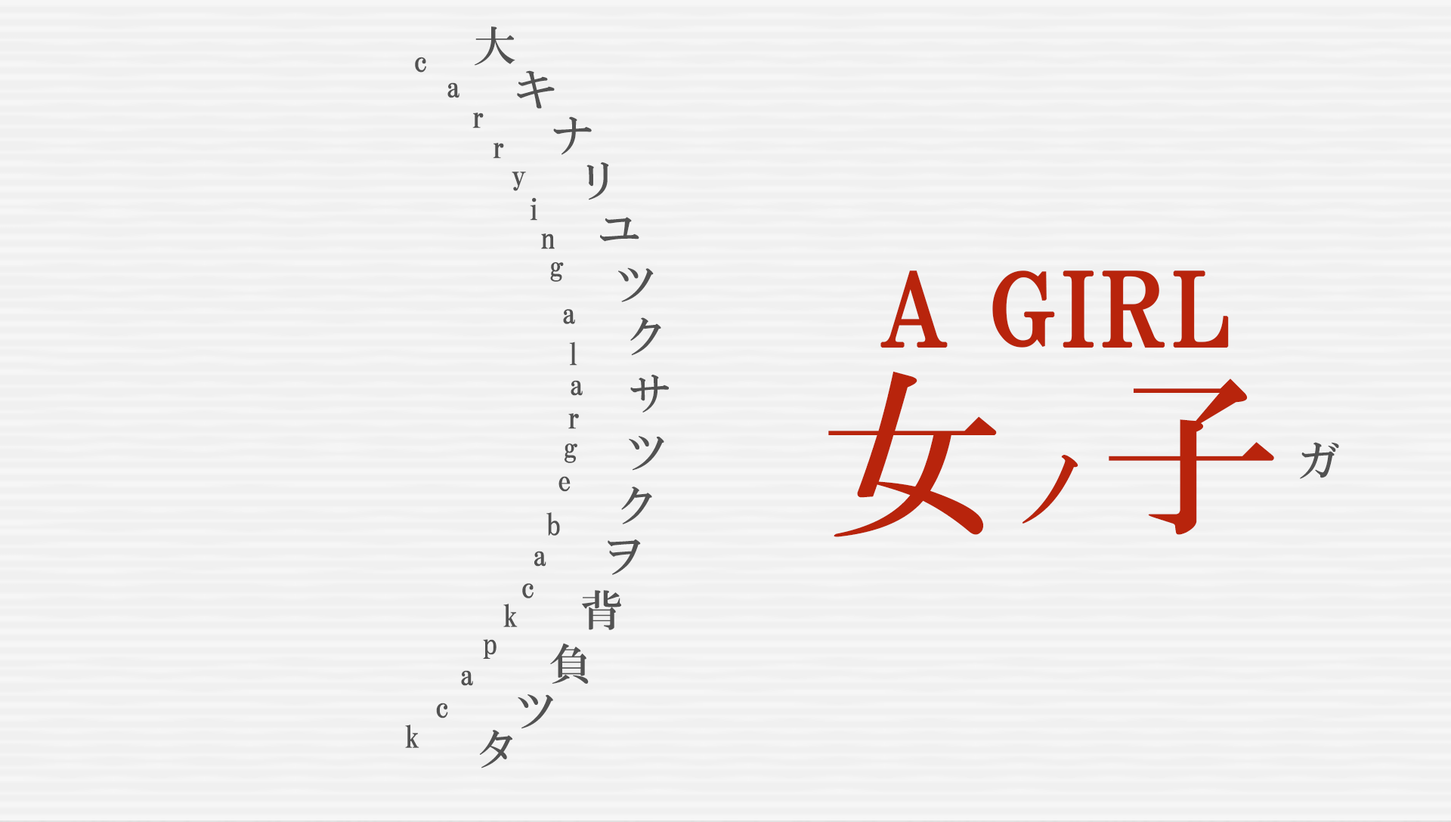
<style>
.page{position:relative;width:1451px;height:822px;background:#f0f0f0}
.page>*{position:absolute;margin:0}
.t1{font:43.1px "HGMinchoB";letter-spacing:0.17em;color:#525252}
.t2{font:30.2px "HGMinchoB";letter-spacing:0.17em;color:#525252}
.t3{font:100.7px "HGPMinchoB";letter-spacing:0.01em;color:#b8240c;font-weight:bold}
.t4{font:180.6px "HGMinchoB";letter-spacing:0.04em;color:#b8240c}
.t5{font:88.4px "HGMinchoB";letter-spacing:0.04em;color:#b8240c}
.t6{font:43.1px "HGMinchoB";letter-spacing:0.04em;color:#525252}
</style>
<div class="page">
<p class="t1" style="left:474px;top:26px;width:41px;height:40px">大</p>
<p class="t2" style="left:415px;top:57px;width:11px;height:16px">c</p>
<p class="t1" style="left:517px;top:70px;width:38px;height:39px">キ</p>
<p class="t2" style="left:447px;top:82px;width:12px;height:16px">a</p>
<p class="t2" style="left:472px;top:113px;width:12px;height:15px">r</p>
<p class="t1" style="left:553px;top:116px;width:39px;height:39px">ナ</p>
<p class="t2" style="left:493px;top:143px;width:11px;height:16px">r</p>
<p class="t1" style="left:586px;top:162px;width:23px;height:38px">リ</p>
<p class="t2" style="left:511px;top:172px;width:15px;height:19px">y</p>
<p class="t2" style="left:530px;top:197px;width:7px;height:24px">i</p>
<p class="t1" style="left:600px;top:217px;width:39px;height:25px">ユ</p>
<p class="t2" style="left:541px;top:233px;width:14px;height:16px">n</p>
<p class="t2" style="left:550px;top:262px;width:14px;height:20px">g</p>
<p class="t1" style="left:618px;top:267px;width:36px;height:35px">ツ</p>
<p class="t3" style="left:880px;top:270px;width:348px;height:78px">A GIRL</p>
<p class="t2" style="left:563px;top:309px;width:12px;height:15px">a</p>
<p class="t1" style="left:630px;top:317px;width:31px;height:39px">ク</p>
<p class="t2" style="left:569px;top:341px;width:8px;height:25px">l</p>
<p class="t1" style="left:630px;top:374px;width:39px;height:39px">サ</p>
<p class="t4" style="left:828px;top:371px;width:446px;height:166px">女<span class="t5">ノ</span>子</p>
<p class="t2" style="left:570px;top:380px;width:13px;height:16px">a</p>
<p class="t2" style="left:568px;top:413px;width:11px;height:16px">r</p>
<p class="t1" style="left:629px;top:436px;width:35px;height:35px">ツ</p>
<p class="t2" style="left:564px;top:443px;width:13px;height:20px">g</p>
<p class="t6" style="left:1300px;top:442px;width:39px;height:37px">ガ</p>
<p class="t2" style="left:558px;top:476px;width:12px;height:16px">e</p>
<p class="t1" style="left:621px;top:487px;width:31px;height:37px">ク</p>
<p class="t2" style="left:546px;top:512px;width:14px;height:24px">b</p>
<p class="t1" style="left:607px;top:539px;width:34px;height:36px">ヲ</p>
<p class="t2" style="left:534px;top:551px;width:12px;height:16px">a</p>
<p class="t2" style="left:522px;top:583px;width:11px;height:15px">c</p>
<p class="t1" style="left:582px;top:590px;width:39px;height:40px">背</p>
<p class="t2" style="left:503px;top:604px;width:15px;height:23px">k</p>
<p class="t2" style="left:483px;top:639px;width:13px;height:20px">p</p>
<p class="t1" style="left:550px;top:643px;width:39px;height:41px">負</p>
<p class="t2" style="left:461px;top:670px;width:12px;height:16px">a</p>
<p class="t1" style="left:518px;top:694px;width:35px;height:35px">ツ</p>
<p class="t2" style="left:436px;top:703px;width:12px;height:16px">c</p>
<p class="t2" style="left:405px;top:725px;width:14px;height:23px">k</p>
<p class="t1" style="left:479px;top:730px;width:33px;height:38px">タ</p>
</div>
